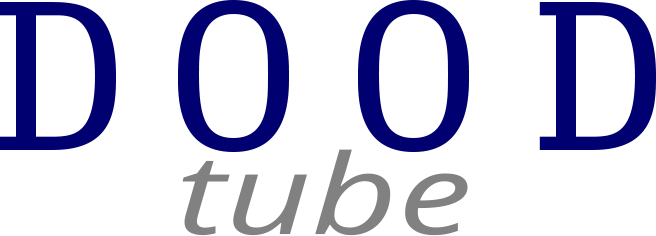
<style>
.page{position:relative;width:656px;height:236px;background:#ffffff}
.page>*{position:absolute;margin:0}
.t1{font:221.9px "OratorStd";color:#000070;scale:1.35 1}
.t2{font:110.9px "OpenSans-Italic";color:#818181;scale:1.35 1}
</style>
<div class="page">
<p class="t1" style="left:0px;top:0px;width:656px;height:152px">DOOD</p>
<p class="t2" style="left:182px;top:149px;width:286px;height:87px">tube</p>
</div>
